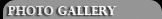
<style>
.page{position:relative;width:162px;height:19px;background:#959595}
.page>*{position:absolute;margin:0}
.t1{font:12px "PerpetuaTitlingMT-Bold";color:#f6f6f6}
.t2{font:12px "PerpetuaTitlingMT-Bold";color:#e8e8e8}
</style>
<div class="page">
<p class="t1" style="left:8px;top:6px;width:109px;height:9px"><span class="t2">PHOTO </span>Gallery</p>
</div>
